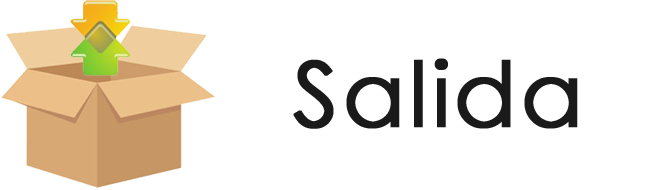
<style>
.page{position:relative;width:670px;height:190px;background:#ffffff}
.page>*{position:absolute;margin:0}
.t1{font:90px "CenturyGothic";letter-spacing:0.025em;color:#1a1a1a;font-weight:bold}
</style>
<div class="page">
<p class="t1" style="left:293px;top:58px;width:285px;height:71px">Salida</p>
</div>
